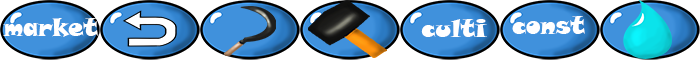
<style>
.page{position:relative;width:700px;height:60px;background:#ffffff}
.page>*{position:absolute;margin:0}
.t1{font:24px "SnapITC-Regular";color:#ffffff}
</style>
<div class="page">
<p class="t1" style="left:512px;top:16px;width:73px;height:18px">constr</p>
<p class="t1" style="left:3px;top:18px;width:95px;height:19px">market</p>
<p class="t1" style="left:421px;top:19px;width:66px;height:18px">culti</p>
</div>
